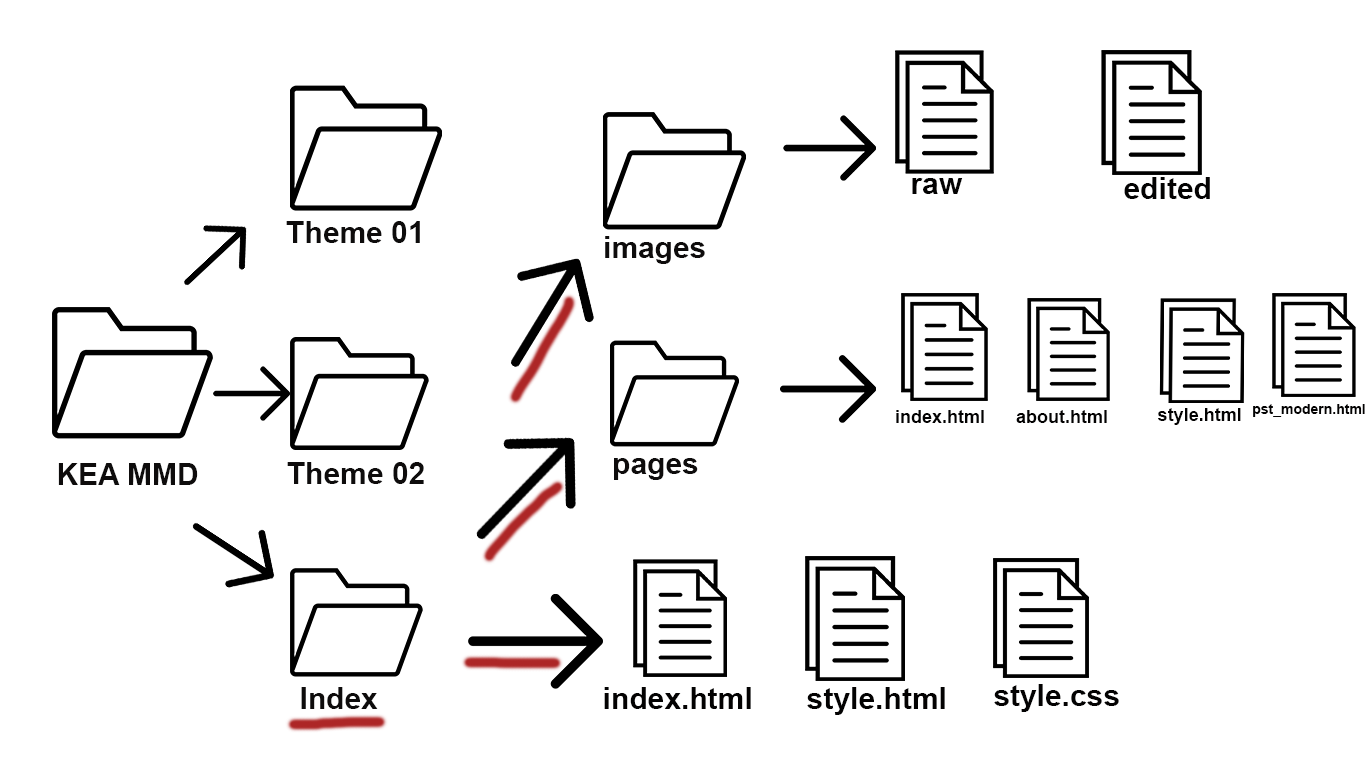
<style>
.page{position:relative;width:1366px;height:768px;background:#ffffff}
.page>*{position:absolute;margin:0}
.t1{font:30px "Arial-BoldMT";color:#030202}
.t2{font:30px "Arial-BoldMT";color:#0e0c0c}
.t3{font:18px "Arial-BoldMT";color:#030202}
.t4{font:14px "Arial-BoldMT";color:#030202}
</style>
<div class="page">
<p class="t1" style="left:912px;top:178px;width:51px;height:16px">raw</p>
<p class="t1" style="left:1124px;top:177px;width:86px;height:22px">edited</p>
<p class="t2" style="left:286px;top:221px;width:134px;height:22px">Theme 01</p>
<p class="t2" style="left:605px;top:236px;width:100px;height:28px">images</p>
<p class="t3" style="left:896px;top:410px;width:88px;height:13px">index.html</p>
<p class="t3" style="left:1016px;top:410px;width:91px;height:13px">about.html</p>
<p class="t3" style="left:1158px;top:408px;width:83px;height:17px">style.html</p>
<p class="t4" style="left:1253px;top:404px;width:112px;height:13px">pst_modern.html</p>
<p class="t2" style="left:287px;top:462px;width:137px;height:22px">Theme 02</p>
<p class="t2" style="left:614px;top:458px;width:84px;height:22px">pages</p>
<p class="t2" style="left:58px;top:463px;width:140px;height:22px">KEA MMD</p>
<p class="t2" style="left:301px;top:687px;width:77px;height:22px">Index</p>
<p class="t1" style="left:604px;top:687px;width:147px;height:22px">index.html</p>
<p class="t1" style="left:807px;top:687px;width:138px;height:28px">style.html</p>
<p class="t1" style="left:994px;top:684px;width:125px;height:28px">style.css</p>
</div>
